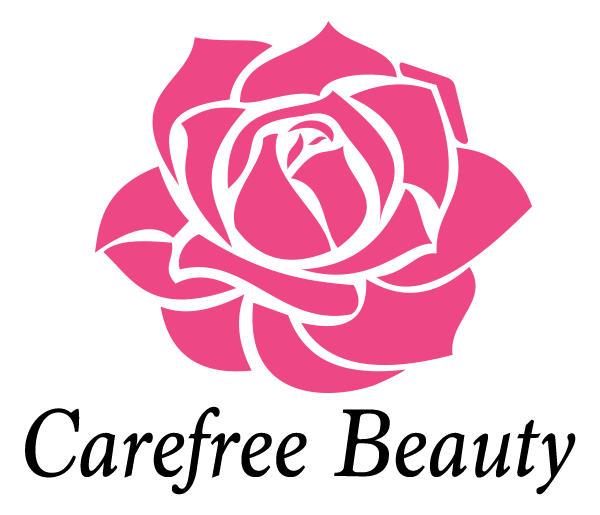
<style>
.page{position:relative;width:600px;height:515px;background:#ffffff}
.page>*{position:absolute;margin:0}
.t1{font:100px "Marion-Italic";color:#000000}
</style>
<div class="page">
<p class="t1" style="left:25px;top:406px;width:551px;height:89px">Carefree Beauty</p>
</div>
